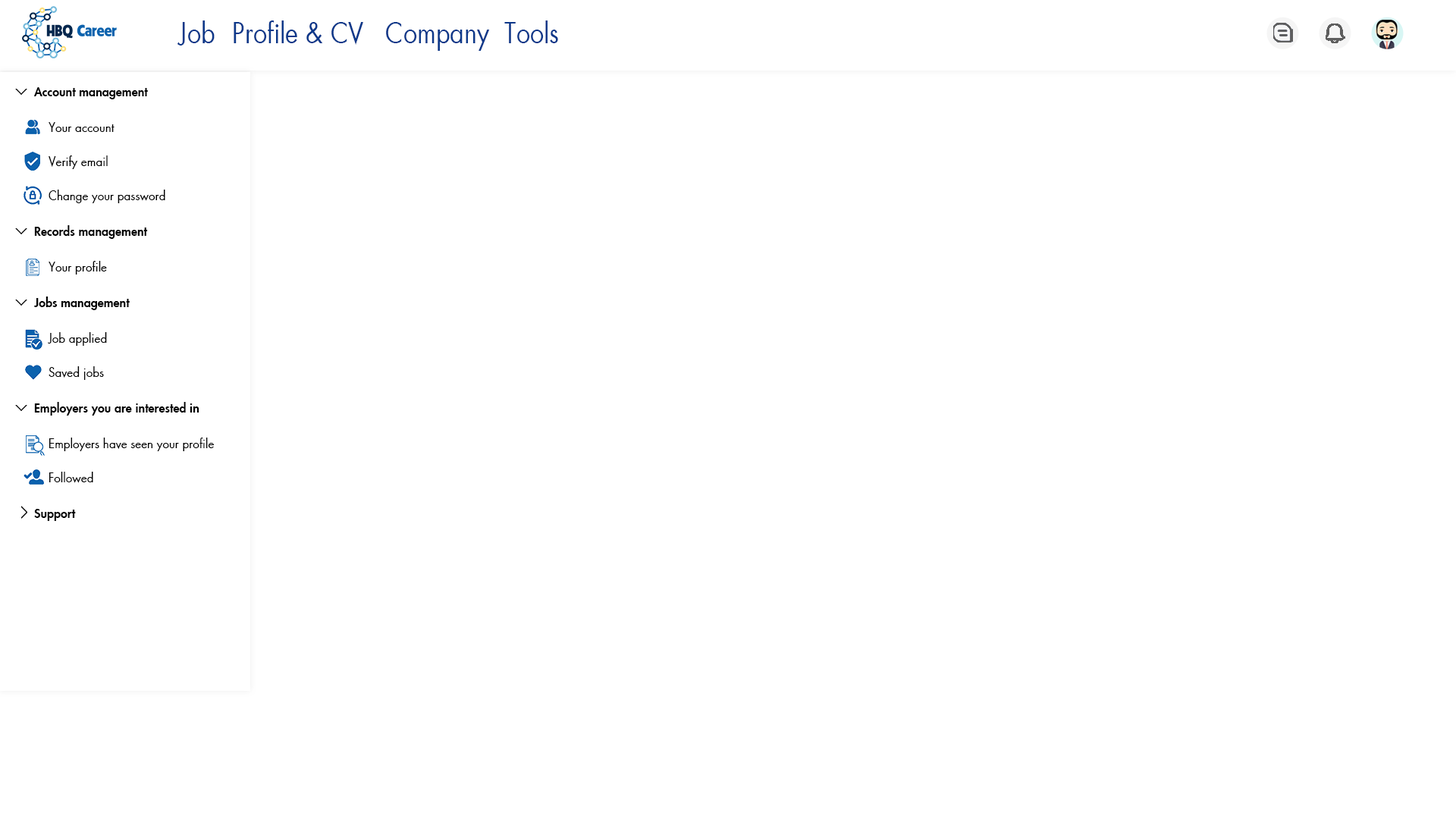
<style>
.page{position:relative;width:1456px;height:819px;background:#ffffff}
.page>*{position:absolute;margin:0}
.t1{font:27.3px "SFUFuturaBook";color:#0c388a;scale:0.9 1}
.t2{font:12.1px "SFUFuturaHeavy";color:#000000}
.t3{font:12.1px "SFUFuturaBook";color:#000000;scale:0.95 1}
</style>
<div class="page">
<p class="t1" style="left:177px;top:20px;width:38px;height:25px">Job</p>
<p class="t1" style="left:234px;top:20px;width:129px;height:25px">Profile &amp; CV</p>
<p class="t1" style="left:386px;top:22px;width:104px;height:29px">Company</p>
<p class="t1" style="left:504px;top:20px;width:54px;height:23px">Tools</p>
<p class="t2" style="left:33px;top:87px;width:115px;height:12px">Account management</p>
<p class="t3" style="left:49px;top:122px;width:66px;height:10px">Your account</p>
<p class="t3" style="left:49px;top:155px;width:59px;height:14px">Verify email</p>
<p class="t3" style="left:49px;top:190px;width:116px;height:13px">Change your password</p>
<p class="t2" style="left:34px;top:225px;width:114px;height:14px">Records management</p>
<p class="t3" style="left:49px;top:261px;width:58px;height:14px">Your profile</p>
<p class="t2" style="left:33px;top:297px;width:97px;height:13px">Jobs management</p>
<p class="t3" style="left:48px;top:332px;width:59px;height:14px">Job applied</p>
<p class="t3" style="left:49px;top:366px;width:55px;height:14px">Saved jobs</p>
<p class="t2" style="left:34px;top:402px;width:165px;height:14px">Employers you are interested in</p>
<p class="t3" style="left:49px;top:438px;width:165px;height:13px">Employers have seen your profile</p>
<p class="t3" style="left:49px;top:472px;width:44px;height:11px">Followed</p>
<p class="t2" style="left:34px;top:509px;width:42px;height:12px">Support</p>
</div>
